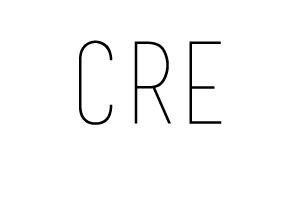
<style>
.page{position:relative;width:300px;height:210px;background:#ffffff}
.page>*{position:absolute;margin:0}
.t1{font:112.5px "basictitlefont";color:#000000}
</style>
<div class="page">
<p class="t1" style="left:79px;top:40px;width:143px;height:85px">cre</p>
</div>
